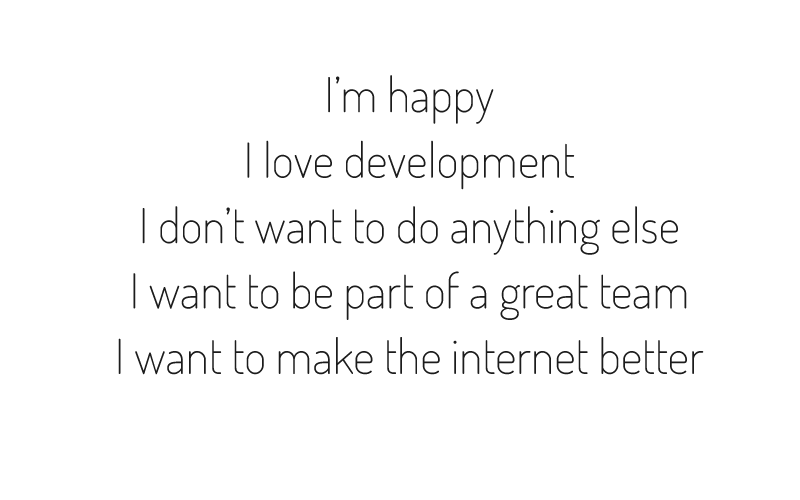
<style>
.page{position:relative;width:800px;height:500px;background:#ffffff}
.page>*{position:absolute;margin:0}
.t1{font:48px/21.8px "Dosis-ExtraLight";color:#1c1c1c}
</style>
<div class="page">
<p class="t1" style="left:118px;top:75px;width:586px;height:300px;text-align:center">I’m happy<br><br><br>I love development<br><br><br>I don’t want to do anything else<br><br><br>I want to be part of a great team<br><br><br>I want to make the internet better</p>
</div>
